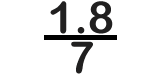
<style>
.page{position:relative;width:160px;height:75px;background:#ffffff}
.page>*{position:absolute;margin:0}
.t1{font:44px "ArialRoundedMTBold";color:#212020}
</style>
<div class="page">
<p class="t1" style="left:50px;top:1px;width:63px;height:33px">1.8</p>
<p class="t1" style="left:71px;top:41px;width:22px;height:33px">7</p>
</div>
